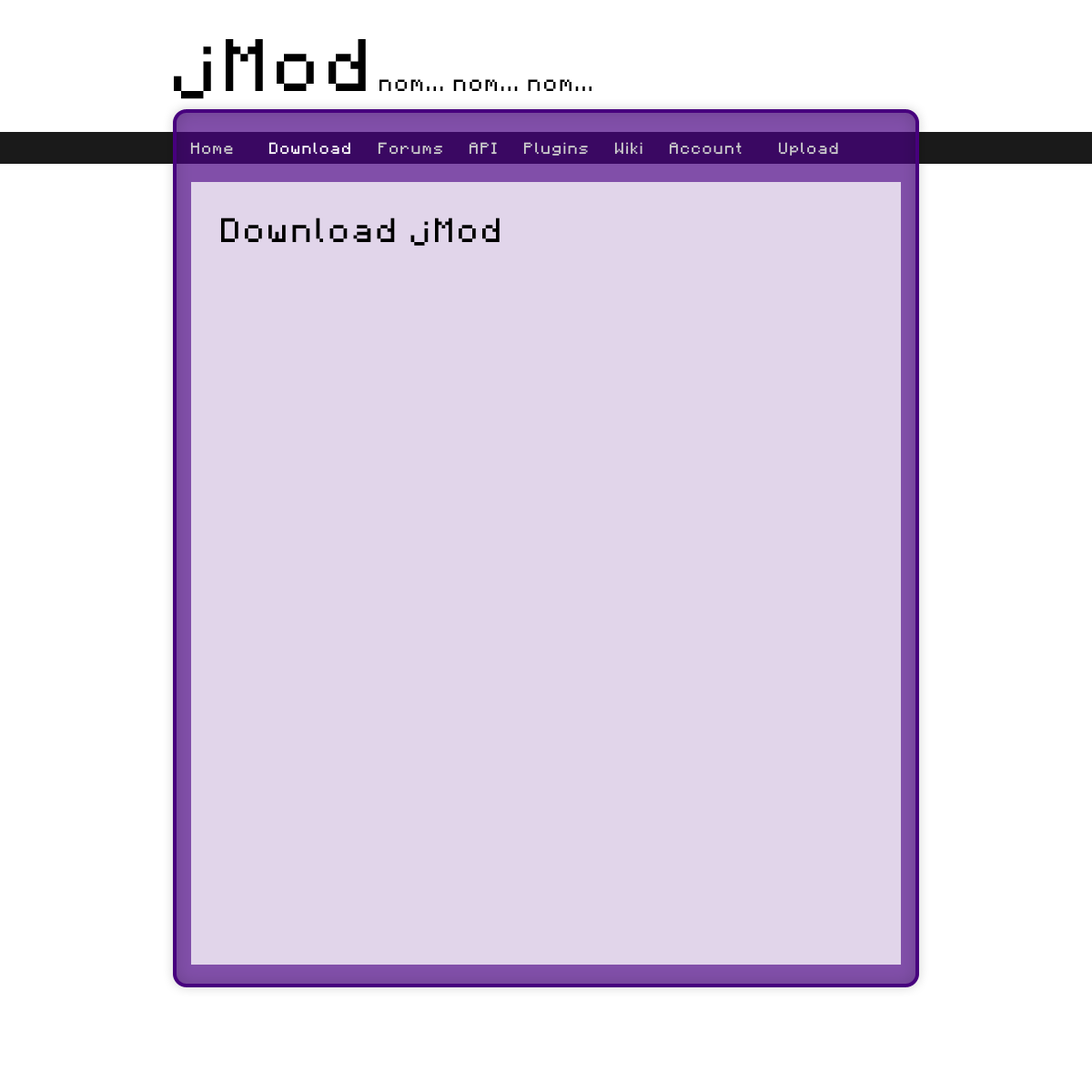
<style>
.page{position:relative;width:1092px;height:1092px;background:#e1d5ea}
.page>*{position:absolute;margin:0}
.t1{font:59.1px "Minecraft";letter-spacing:0.12em;color:#000000}
.t2{font:18.2px "Minecraft";letter-spacing:0.12em;color:#000000}
.t3{font:12.7px "Minecraft";letter-spacing:0.12em;color:#cccccc}
.t4{font:12.7px "Minecraft";letter-spacing:0.12em;color:#ffffff}
.t5{font:27.3px "Minecraft";letter-spacing:0.12em;color:#000000}
</style>
<div class="page">
<p class="t1" style="left:174px;top:39px;width:192px;height:60px">jMod</p>
<p class="t2" style="left:379px;top:79px;width:212px;height:12px">nom... nom... nom...</p>
<p class="t3" style="left:190px;top:142px;width:43px;height:13px">Home</p>
<p class="t4" style="left:268px;top:142px;width:82px;height:13px">Download</p>
<p class="t3" style="left:378px;top:142px;width:64px;height:13px">Forums</p>
<p class="t3" style="left:469px;top:142px;width:28px;height:13px">API</p>
<p class="t3" style="left:523px;top:142px;width:65px;height:14px">Plugins</p>
<p class="t3" style="left:614px;top:142px;width:28px;height:13px">Wiki</p>
<p class="t3" style="left:669px;top:142px;width:73px;height:13px">Account</p>
<p class="t3" style="left:778px;top:142px;width:60px;height:14px">Upload</p>
<p class="t5" style="left:221px;top:217px;width:279px;height:29px">Download jMod</p>
</div>
